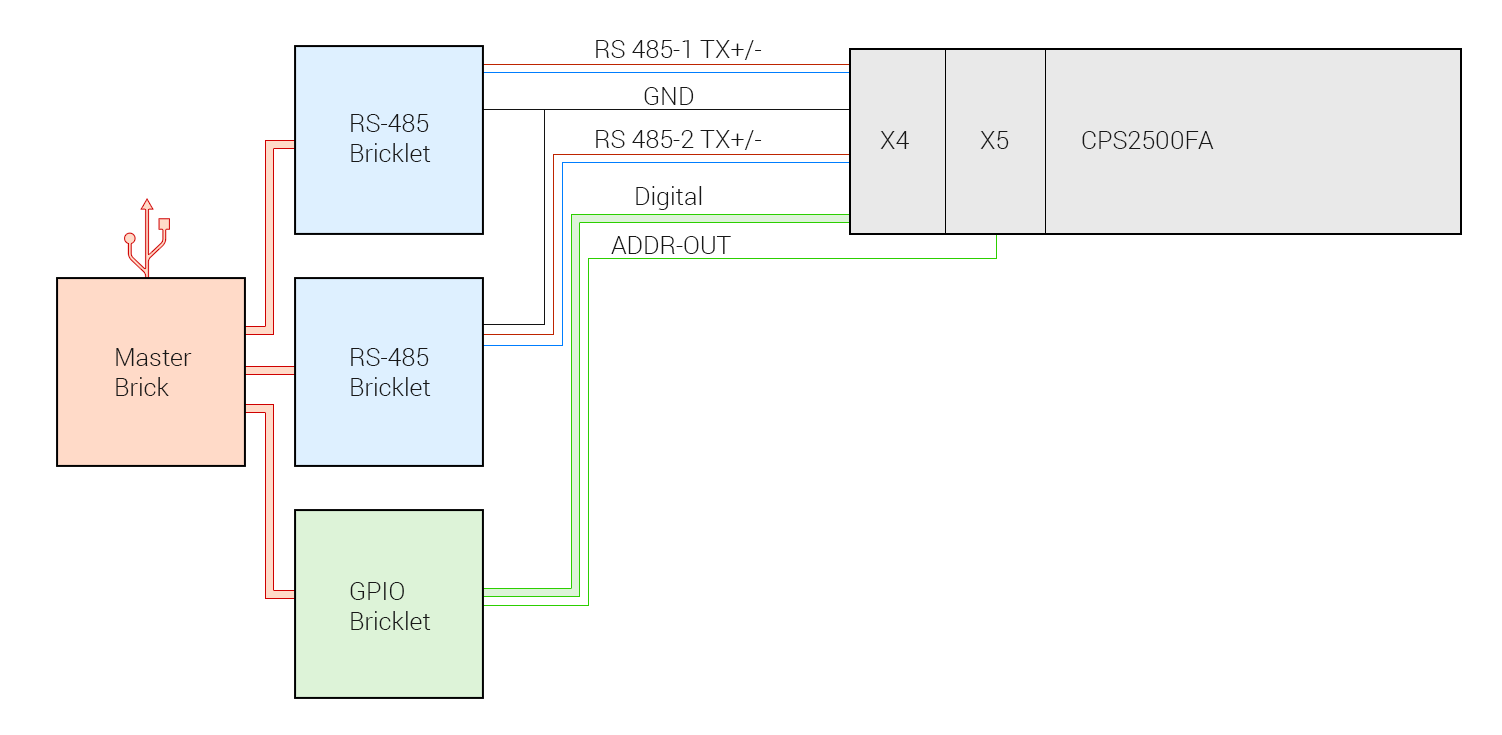
<style>
.page{position:relative;width:1502px;height:735px;background:#ffffff}
.page>*{position:absolute;margin:0}
.t1{font:25px "Roboto-Light";color:#181818}
</style>
<div class="page">
<p class="t1" style="left:596px;top:40px;width:166px;height:20px">RS 485-1 TX+/-</p>
<p class="t1" style="left:644px;top:87px;width:50px;height:18px">GND</p>
<p class="t1" style="left:351px;top:114px;width:80px;height:48px">RS-485<br>Bricklet</p>
<p class="t1" style="left:596px;top:130px;width:166px;height:20px">RS 485-2 TX+/-</p>
<p class="t1" style="left:880px;top:131px;width:29px;height:18px">X4</p>
<p class="t1" style="left:980px;top:131px;width:29px;height:18px">X5</p>
<p class="t1" style="left:1082px;top:131px;width:132px;height:18px">CPS2500FA</p>
<p class="t1" style="left:636px;top:186px;width:66px;height:24px">Digital</p>
<p class="t1" style="left:611px;top:236px;width:120px;height:18px">ADDR-OUT</p>
<p class="t1" style="left:116px;top:348px;width:76px;height:48px">Master<br>Brick</p>
<p class="t1" style="left:351px;top:348px;width:80px;height:48px">RS-485<br>Bricklet</p>
<p class="t1" style="left:350px;top:582px;width:81px;height:48px">GPIO<br>Bricklet</p>
</div>
